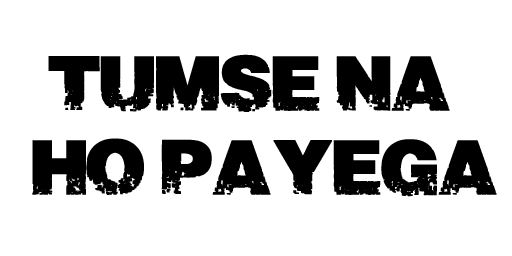
<style>
.page{position:relative;width:512px;height:256px;background:#ffffff}
.page>*{position:absolute;margin:0}
.t1{font:70px "ScorchedEarth";color:#000000;font-weight:bold}
</style>
<div class="page">
<p class="t1" style="left:32px;top:54px;width:465px;height:143px">TUMSE NA <br>HO PAYEGA</p>
</div>
